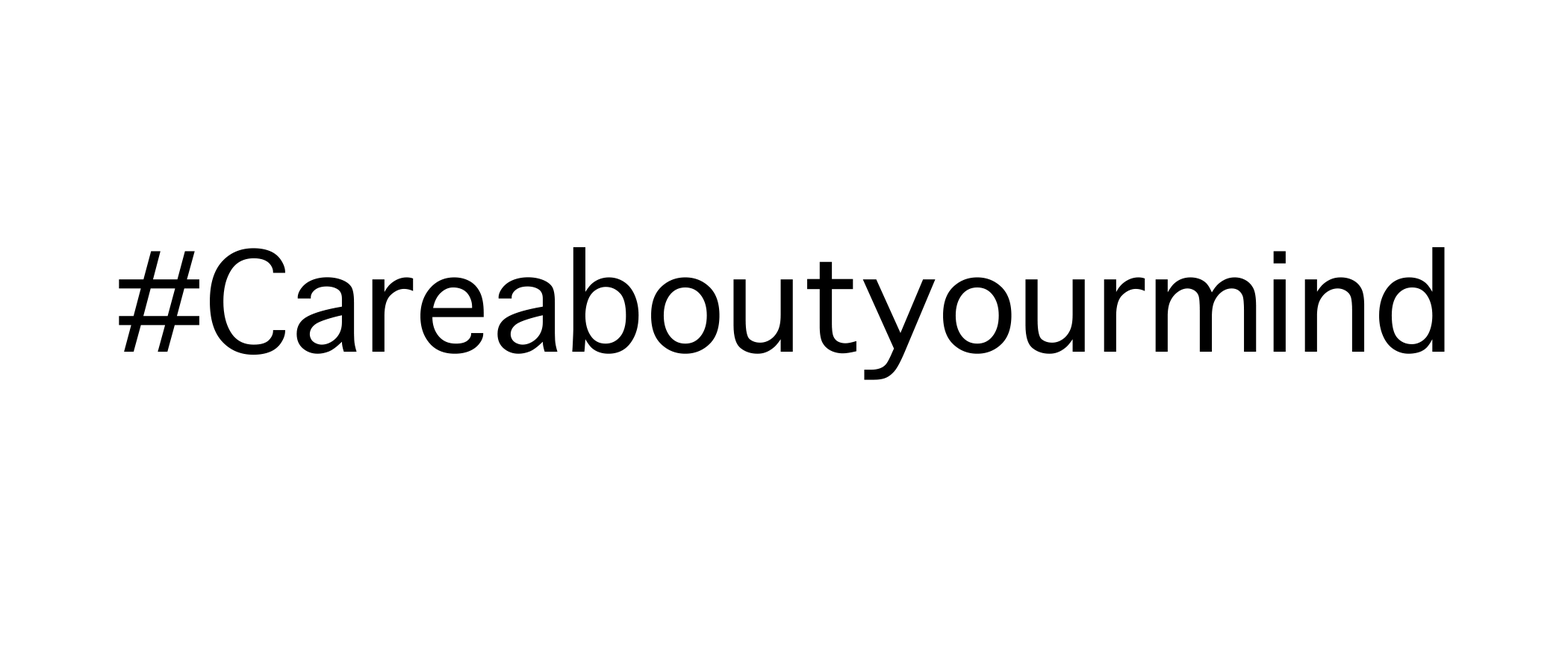
<style>
.page{position:relative;width:1568px;height:672px;background:#ffffff}
.page>*{position:absolute;margin:0}
.t1{font:186.7px "AppleSymbols";color:#000000}
</style>
<div class="page">
<p class="t1" style="left:119px;top:247px;width:1326px;height:133px">#Careaboutyourmind</p>
</div>
